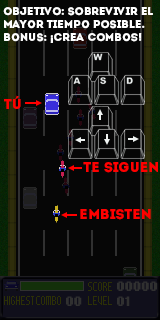
<style>
.page{position:relative;width:160px;height:320px;background:#060606}
.page>*{position:absolute;margin:0}
.t1{font:11px "Intro";color:#ffffff}
.t2{font:14px "Intro";color:#ff0000}
</style>
<div class="page">
<p class="t1" style="left:3px;top:7px;width:150px;height:36px">objetivo: sobrevivir el<br>mayor tiempo posible.<br>bonus: ¡crea combos!</p>
<p class="t2" style="left:4px;top:95px;width:17px;height:14px">Tú</p>
<p class="t2" style="left:83px;top:162px;width:75px;height:11px">te siguen</p>
<p class="t2" style="left:80px;top:209px;width:71px;height:11px">embisten</p>
</div>
